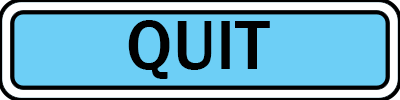
<style>
.page{position:relative;width:400px;height:100px;background:#6dcff6}
.page>*{position:absolute;margin:0}
.t1{font:72px "FranklinGothic-Medium";color:#000000}
</style>
<div class="page">
<p class="t1" style="left:128px;top:20px;width:142px;height:59px">QUIT</p>
</div>
